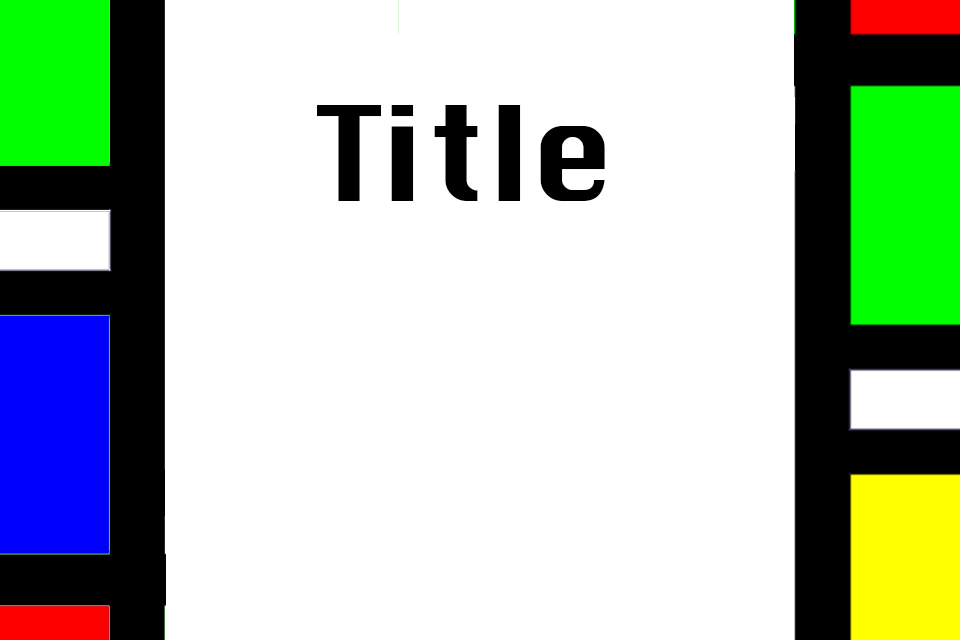
<style>
.page{position:relative;width:960px;height:640px;background:#ffffff}
.page>*{position:absolute;margin:0}
.t1{font:128px "Silom";color:#000000}
</style>
<div class="page">
<p class="t1" style="left:317px;top:105px;width:288px;height:96px">Title</p>
</div>
